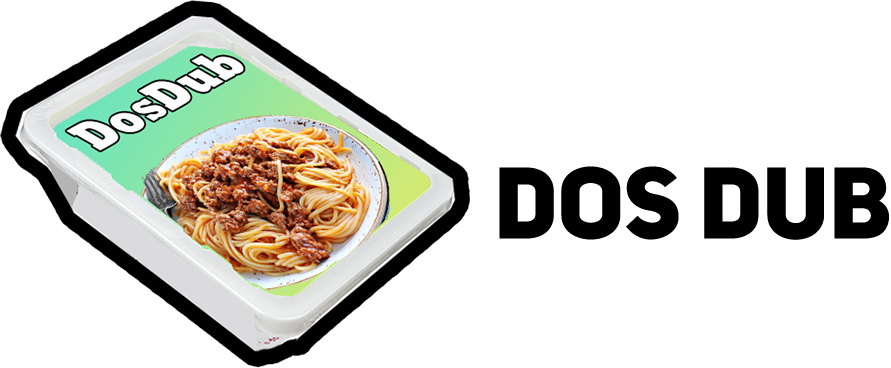
<style>
.page{position:relative;width:891px;height:368px;background:#ffffff}
.page>*{position:absolute;margin:0}
.t1{font:100px "UniSansHeavyCAPS";color:#000000}
.t2{font:72px "Tahoma";color:#000000}
</style>
<div class="page">
<p class="t1" style="left:499px;top:166px;width:390px;height:74px"><span class="t2"><br></span>Dos Dub</p>
</div>
